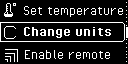
<style>
.page{position:relative;width:128px;height:64px;background:#000000}
.page>*{position:absolute;margin:0}
.t1{font:16px "PixelOperator";color:#ffffff}
.t2{font:16px "PixelOperator-Bold";color:#ffffff}
</style>
<div class="page">
<p class="t1" style="left:24px;top:6px;width:99px;height:11px">Set temperature</p>
<p class="t2" style="left:24px;top:27px;width:87px;height:11px">Change units</p>
<p class="t1" style="left:25px;top:50px;width:85px;height:9px">Enable remote</p>
</div>
